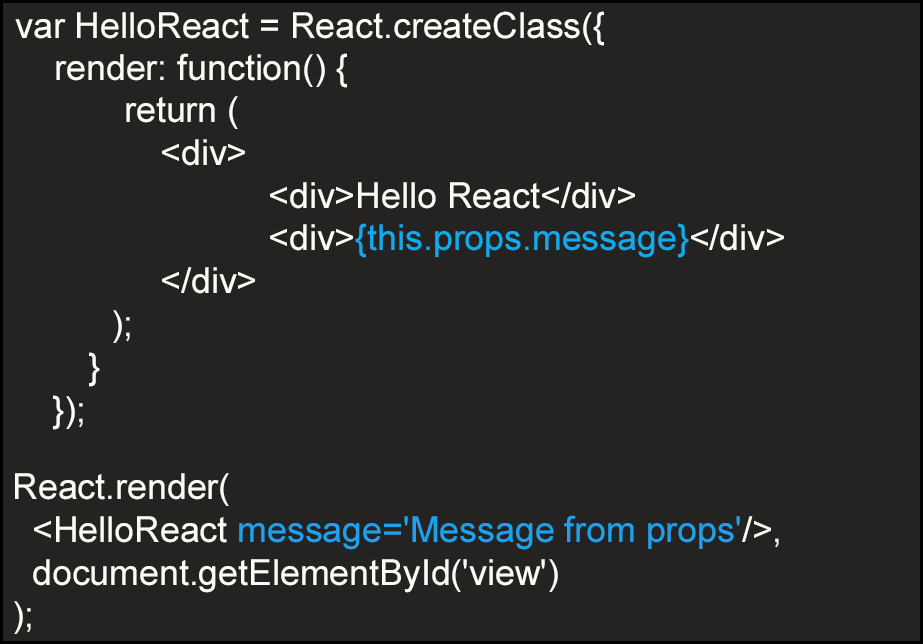
<style>
.page{position:relative;width:923px;height:644px;background:#252222}
.page>*{position:absolute;margin:0}
.t1{font:35.7px "ArialMT";color:#fafbf5}
.t2{font:35.7px "ArialMT";color:#0faced}
.t3{font:35.7px "ArialMT";color:#1fa0ea}
</style>
<div class="page">
<p class="t1" style="left:15px;top:11px;width:589px;height:35px">var HelloReact = React.createClass({</p>
<p class="t1" style="left:56px;top:53px;width:291px;height:35px">render: function() {</p>
<p class="t1" style="left:53px;top:96px;width:731px;height:334px">return (<br>        &lt;div&gt; <br>            &lt;div&gt;Hello React&lt;/div&gt;<br>            &lt;div&gt;<span class="t2">{this.props.message}</span>&lt;/div&gt;<br>        &lt;/div&gt;<br>      );<br> }<br>});</p>
<p class="t1" style="left:14px;top:473px;width:765px;height:161px">React.render(<br>  &lt;HelloReact <span class="t3">message='Message from props'</span>/&gt;,<br>  document.getElementById('view')<br>);</p>
</div>
